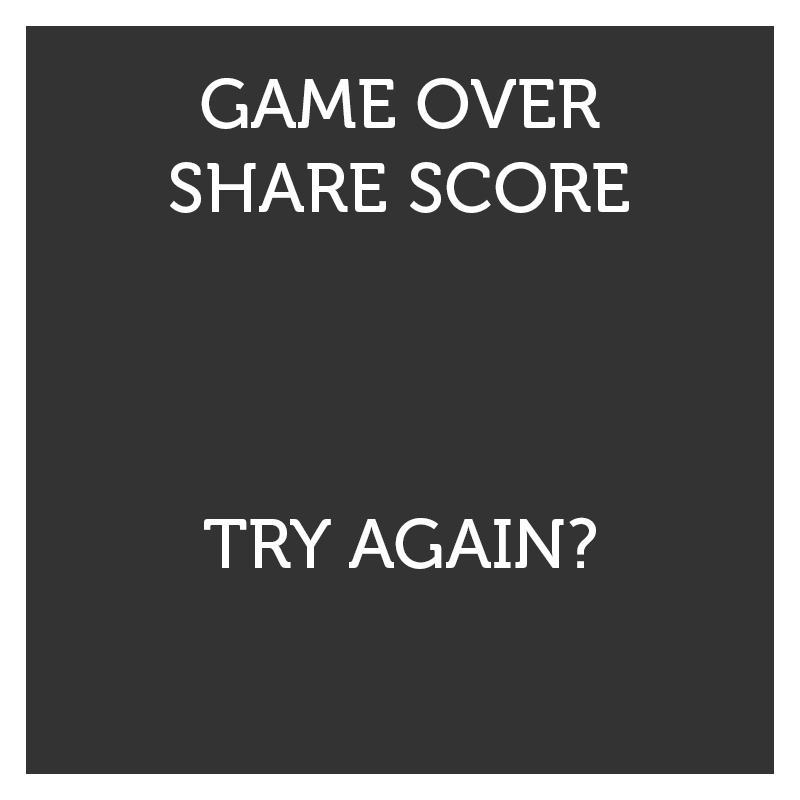
<style>
.page{position:relative;width:800px;height:800px;background:#333333}
.page>*{position:absolute;margin:0}
.t1{font:70px "Museo-500";color:#ffffff}
</style>
<div class="page">
<p class="t1" style="left:170px;top:78px;width:459px;height:135px;text-align:center">GAME OVER<br>SHARE SCORE</p>
<p class="t1" style="left:204px;top:517px;width:392px;height:52px">TRY AGAIN?</p>
</div>
